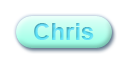
<style>
.page{position:relative;width:128px;height:64px;background:#ffffff}
.page>*{position:absolute;margin:0}
.t1{font:24px "Arial-BoldMT"}
</style>
<div class="page">
<p class="t1" style="left:34px;top:23px;width:60px;height:17px">Chris</p>
</div>
